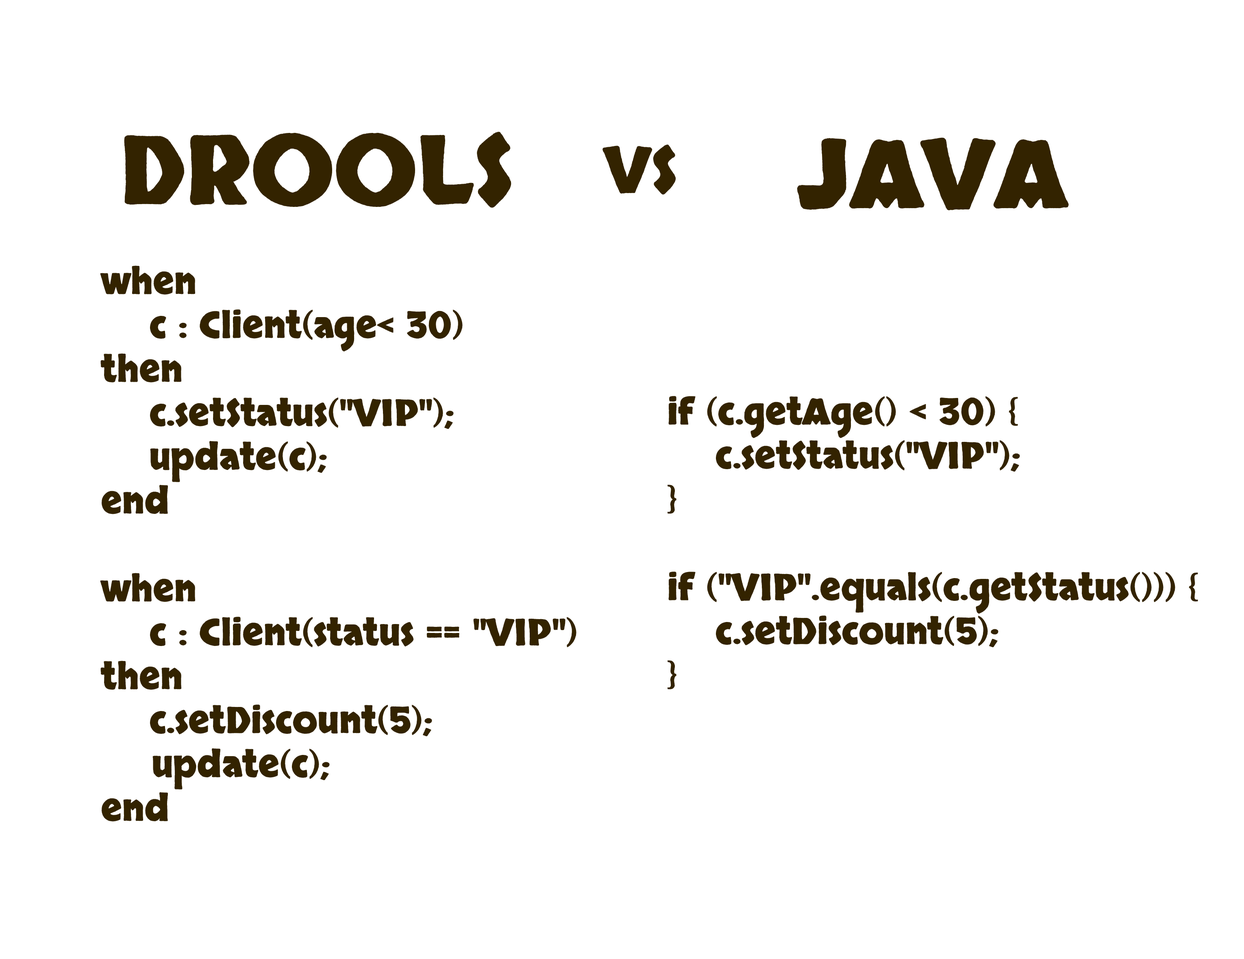
<style>
.page{position:relative;width:1244px;height:959px;background:#ffffff}
.page>*{position:absolute;margin:0}
.t1{font:95.1px "Skranji-Bold";color:#332300}
.t2{font:62.6px "Skranji-Bold";color:#332300}
.t3{font:36.6px "Skranji-Bold";color:#332300}
</style>
<div class="page">
<p class="t1" style="left:124px;top:132px;width:387px;height:76px">DROOLS</p>
<p class="t1" style="left:797px;top:137px;width:272px;height:74px">JAVA</p>
<p class="t2" style="left:602px;top:144px;width:74px;height:51px">VS</p>
<p class="t3" style="left:100px;top:265px;width:476px;height:556px">when<br>    c : Client(age&lt; 30)<br>then<br>    c.setStatus("VIP");<br>    update(c);<br>end<br><br>when<br>    c : Client(status == "VIP")<br>then<br>    c.setDiscount(5);<br>    update(c);<br>end</p>
<p class="t3" style="left:667px;top:396px;width:531px;height:293px">if (c.getAge() &lt; 30) {<br>    c.setStatus("VIP");<br>}<br><br>if ("VIP".equals(c.getStatus())) {<br>    c.setDiscount(5);<br>}</p>
</div>
